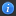
<style>
.page{position:relative;width:16px;height:16px;background:#333333}
.page>*{position:absolute;margin:0}
.t1{font:10.6px "TimesNewRomanPS-BoldItalicMT";letter-spacing:-0.04em;color:#ffffff;scale:0.73 1}
</style>
<div class="page">
<p class="t1" style="left:6px;top:4px;width:4px;height:8px">i</p>
</div>
